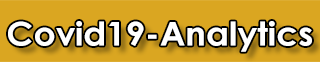
<style>
.page{position:relative;width:320px;height:62px;background:#daa621}
.page>*{position:absolute;margin:0}
.t1{font:32.7px "CenturyGothic-Bold";color:#ffffff;scale:1.06 1}
</style>
<div class="page">
<p class="t1" style="left:8px;top:21px;width:304px;height:31px">Covid19-Analytics</p>
</div>
